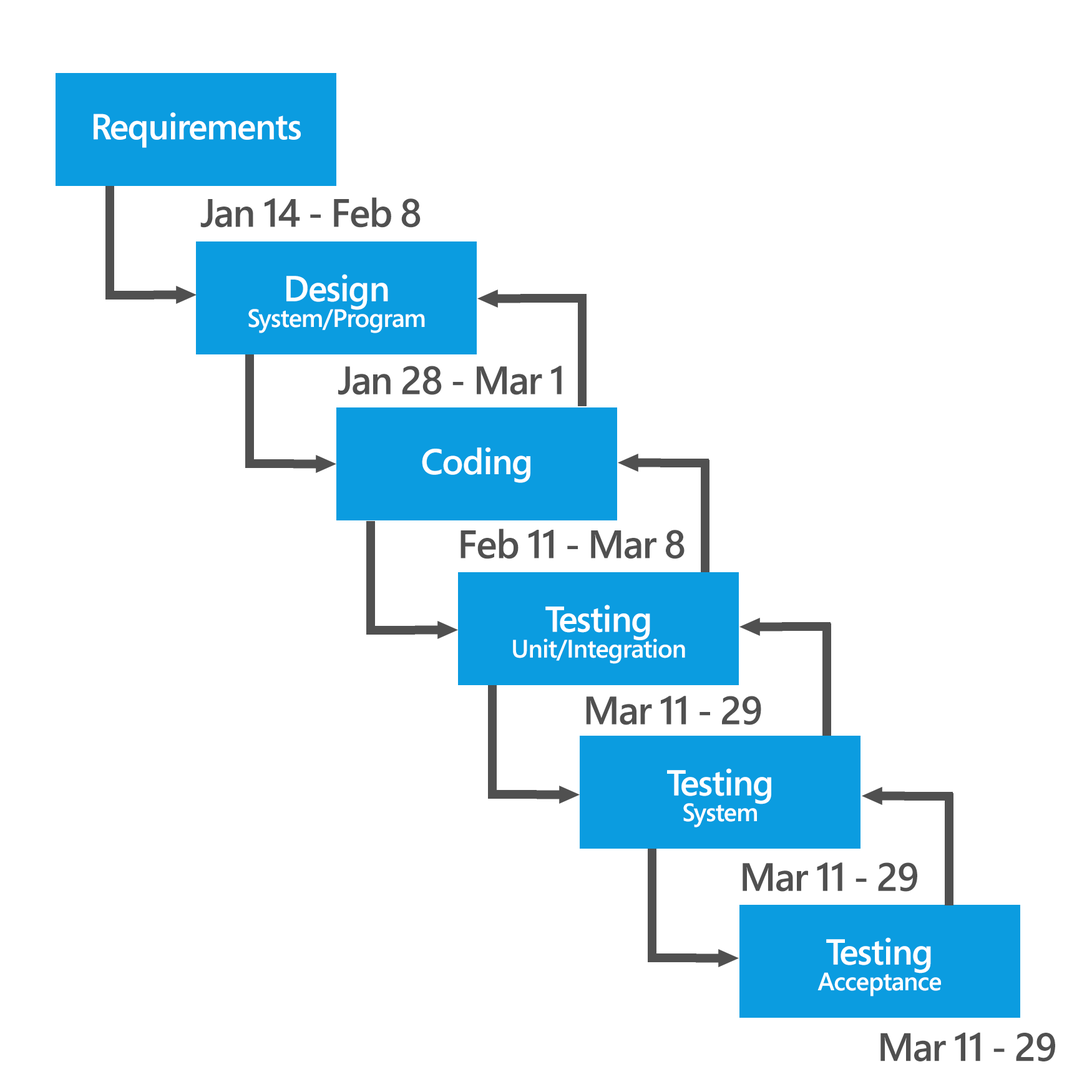
<style>
.page{position:relative;width:1092px;height:1092px;background:#ffffff}
.page>*{position:absolute;margin:0}
.t1{font:36px "SegoePro-Semibold";letter-spacing:-0.025em;color:#ffffff}
.t2{font:39.6px "SegoePro-Semibold";letter-spacing:-0.025em;color:#505050}
.t3{font:25.2px "SegoePro-Semibold";letter-spacing:-0.025em;color:#ffffff}
</style>
<div class="page">
<p class="t1" style="left:94px;top:112px;width:207px;height:36px">Requirements</p>
<p class="t2" style="left:200px;top:197px;width:221px;height:31px">Jan 14 - Feb 8</p>
<p class="t1" style="left:286px;top:274px;width:102px;height:36px">Design</p>
<p class="t3" style="left:248px;top:309px;width:177px;height:24px">System/Program</p>
<p class="t2" style="left:338px;top:366px;width:224px;height:29px">Jan 28 - Mar 1</p>
<p class="t1" style="left:422px;top:447px;width:108px;height:36px">Coding</p>
<p class="t2" style="left:461px;top:529px;width:224px;height:30px">Feb 11 - Mar 8</p>
<p class="t1" style="left:545px;top:605px;width:105px;height:35px">Testing</p>
<p class="t3" style="left:513px;top:638px;width:172px;height:26px">Unit/Integration</p>
<p class="t2" style="left:586px;top:696px;width:175px;height:29px">Mar 11 - 29</p>
<p class="t1" style="left:667px;top:768px;width:104px;height:36px">Testing</p>
<p class="t3" style="left:683px;top:803px;width:74px;height:24px">System</p>
<p class="t2" style="left:743px;top:862px;width:174px;height:30px">Mar 11 - 29</p>
<p class="t1" style="left:826px;top:937px;width:105px;height:36px">Testing</p>
<p class="t3" style="left:817px;top:972px;width:124px;height:25px">Acceptance</p>
<p class="t2" style="left:880px;top:1032px;width:175px;height:29px">Mar 11 - 29</p>
</div>
